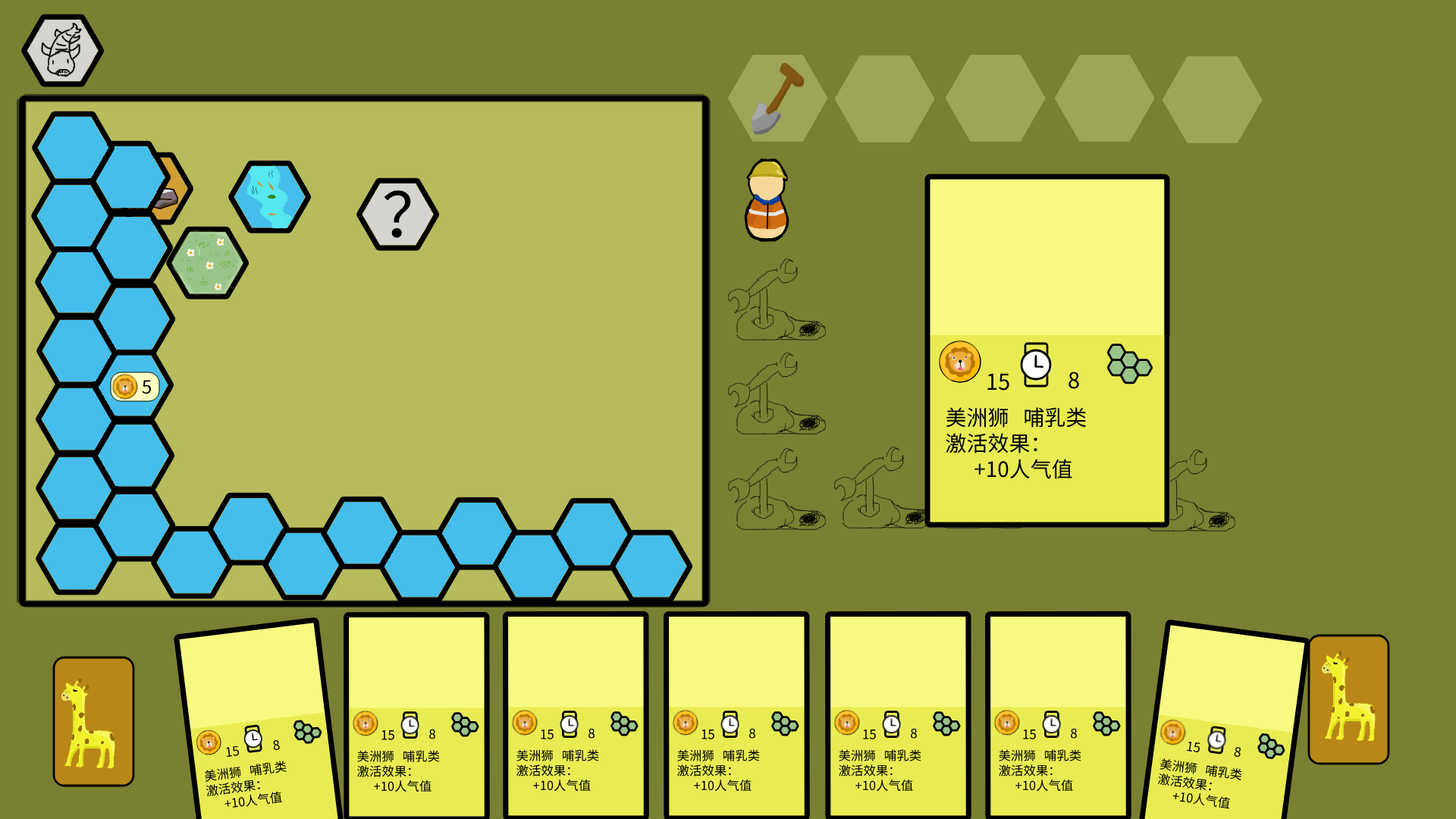
<style>
.page{position:relative;width:1456px;height:819px;background:#798032}
.page>*{position:absolute;margin:0}
.t1{font:61.4px "DejaVuSans";color:#000000}
.t2{font:22px "DejaVuSans";color:#000000}
.t3{font:18.2px "DejaVuSans";color:#000000}
.t4{font:21.2px "DejaVuSans";color:#000000}
.t5{font:12.9px "DejaVuSans";color:#000000}
.t6{font:12.5px "DejaVuSans";color:#000000}
</style>
<div class="page">
<p class="t1" style="left:384px;top:190px;width:27px;height:48px">？</p>
<p class="t2" style="left:987px;top:373px;width:22px;height:18px">15</p>
<p class="t2" style="left:1068px;top:372px;width:11px;height:17px">8</p>
<p class="t3" style="left:142px;top:380px;width:10px;height:14px">5</p>
<p class="t4" style="left:946px;top:407px;width:141px;height:72px">美洲狮   哺乳类  <br>激活效果：<br>      +10人气值</p>
<p class="t5" style="left:381px;top:730px;width:13px;height:10px">15</p>
<p class="t5" style="left:429px;top:729px;width:6px;height:10px">8</p>
<p class="t5" style="left:541px;top:730px;width:13px;height:9px">15</p>
<p class="t5" style="left:588px;top:728px;width:7px;height:11px">8</p>
<p class="t5" style="left:701px;top:730px;width:13px;height:9px">15</p>
<p class="t5" style="left:749px;top:728px;width:6px;height:11px">8</p>
<p class="t5" style="left:863px;top:730px;width:13px;height:9px">15</p>
<p class="t5" style="left:911px;top:728px;width:6px;height:11px">8</p>
<p class="t5" style="left:1023px;top:730px;width:13px;height:9px">15</p>
<p class="t5" style="left:1071px;top:728px;width:6px;height:11px">8</p>
<p class="t5" style="left:226px;top:745px;width:14px;height:12px;rotate:-7deg">15</p>
<p class="t5" style="left:273px;top:740px;width:7px;height:10px;rotate:-7deg">8</p>
<p class="t6" style="left:357px;top:750px;width:83px;height:42px">美洲狮   哺乳类  <br>激活效果：<br>      +10人气值</p>
<p class="t6" style="left:516px;top:749px;width:83px;height:42px">美洲狮   哺乳类  <br>激活效果：<br>      +10人气值</p>
<p class="t6" style="left:677px;top:749px;width:83px;height:42px">美洲狮   哺乳类  <br>激活效果：<br>      +10人气值</p>
<p class="t6" style="left:839px;top:749px;width:82px;height:42px">美洲狮   哺乳类  <br>激活效果：<br>      +10人气值</p>
<p class="t6" style="left:999px;top:749px;width:82px;height:42px">美洲狮   哺乳类  <br>激活效果：<br>      +10人气值</p>
<p class="t5" style="left:1187px;top:742px;width:13px;height:10px;rotate:8deg">15</p>
<p class="t5" style="left:1234px;top:747px;width:7px;height:10px;rotate:8deg">8</p>
<p class="t6" style="left:205px;top:761px;width:82px;height:47px;rotate:-7deg">美洲狮   哺乳类  <br>激活效果：<br>      +10人气值</p>
<p class="t6" style="left:1157px;top:758px;width:85px;height:51px;rotate:8deg">美洲狮   哺乳类  <br>激活效果：<br>      +10人气值</p>
</div>
